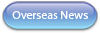
<style>
.page{position:relative;width:100px;height:33px}
.page>*{position:absolute;margin:0}
.t1{font:11.9px "MyriadPro-Regular";color:#ffffff}
</style>
<div class="page">
<p class="t1" style="left:12px;top:11px;width:76px;height:8px">Overseas News</p>
</div>
